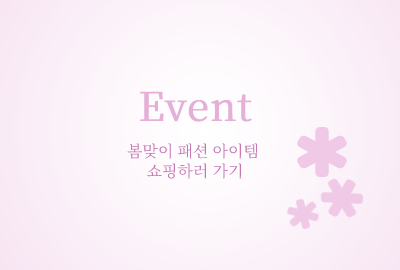
<style>
.page{position:relative;width:400px;height:270px}
.page>*{position:absolute;margin:0}
.t1{font:16px/36px "NotoSerifKR-Regular";color:#c577b2}
.t2{font:40px/36px "NotoSerifKR-Regular";color:#e5afd8;font-weight:bold}
.t3{font:16px "NotoSerifKR-Regular";color:#c577b2}
</style>
<div class="page">
<p class="t1" style="left:127px;top:91px;width:131px;height:88px;text-align:center"><span class="t2">Event<br></span>봄맞이 패션 아이템 <br><span class="t3">쇼핑하러 가기</span></p>
</div>
